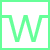
<style>
.page{position:relative;width:50px;height:50px;background:#ffffff}
.page>*{position:absolute;margin:0}
.t1{font:38.7px "Poppins-Regular";color:#66ff99}
</style>
<div class="page">
<p class="t1" style="left:8px;top:15px;width:35px;height:27px">W</p>
</div>
